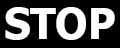
<style>
.page{position:relative;width:120px;height:48px;background:#000000}
.page>*{position:absolute;margin:0}
.t1{font:41.7px "Tahoma-Bold";color:#ffffff}
</style>
<div class="page">
<p class="t1" style="left:5px;top:7px;width:110px;height:33px">STOP</p>
</div>
